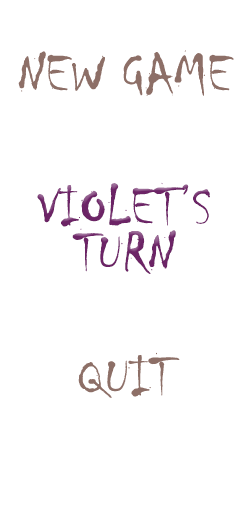
<style>
.page{position:relative;width:250px;height:510px;background:#ffffff}
.page>*{position:absolute;margin:0}
.t1{font:58.3px "Chiller-Regular";color:#8e6f67}
.t2{font:58.3px "Chiller-Regular";color:#6c2466}
</style>
<div class="page">
<p class="t1" style="left:18px;top:50px;width:216px;height:46px">NEW GAME</p>
<p class="t2" style="left:37px;top:182px;width:173px;height:92px">VIOLET’S TURN</p>
<p class="t1" style="left:78px;top:352px;width:102px;height:46px">QUIT</p>
</div>
